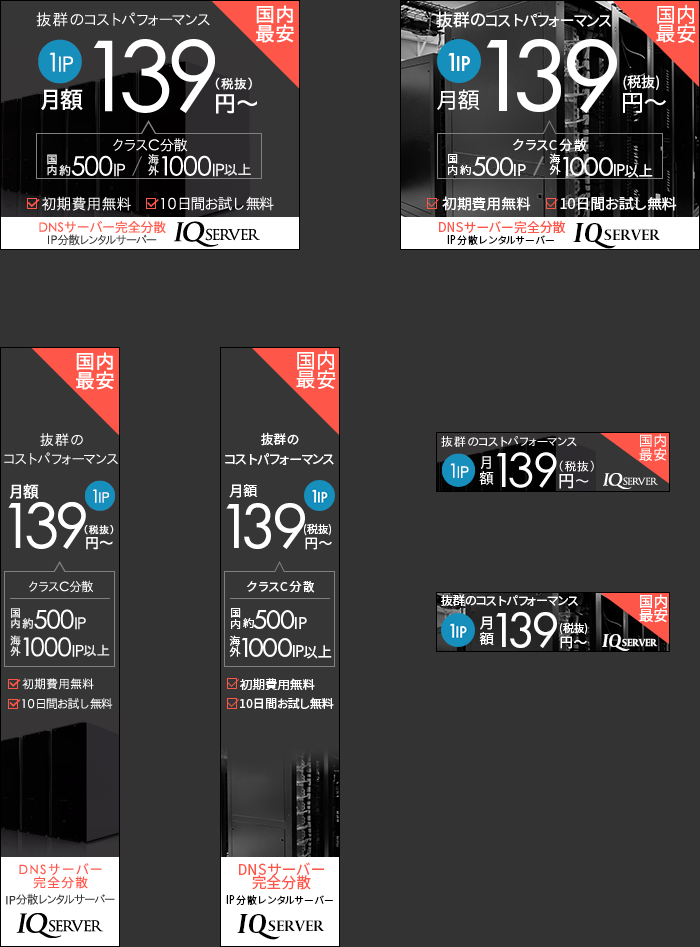
<style>
.page{position:relative;width:700px;height:947px;background:#333333}
.page>*{position:absolute;margin:0}
.t1{font:20px/19px "SourceHanSansJP-Regular";color:#ffffff}
.t2{font:15px "SourceHanSansJP-Regular";color:#ffffff}
.t3{font:17px "SourceHanSansJP-Regular";color:#ffffff}
.t4{font:107.2px "FuturaPT-Book";color:#ffffff}
.t5{font:14px "SourceHanSansJP-Regular";color:#ffffff}
.t6{font:22px "SourceHanSansJP-Normal";color:#ffffff}
.t7{font:23px "SourceHanSansJP-Regular";color:#ffffff}
.t8{font:13px "SourceHanSansJP-Regular";color:#fefefe}
.t9{font:11px/11px "SourceHanSansJP-Normal";color:#fefefe}
.t10{font:28px "FuturaPT-Book";color:#fefefe}
.t11{font:18px "FuturaPT-Book";color:#fefefe}
.t12{font:14px "SourceHanSansJP-Normal";color:#fefefe}
.t13{font:11px "SourceHanSansJP-Normal";color:#fefefe}
.t14{font:14.5px "SourceHanSansJP-Regular";color:#ffffff}
.t15{font:13px "SourceHanCodeJP-Regular";color:#fe5649}
.t16{font:29px "Capitolium2-BoldItalic";color:#000000}
.t17{font:16px "Capitolium2-Bold";color:#000000}
.t18{font:10px "SourceHanCodeJP-Regular";color:#000000}
.t19{font:13px "FuturaPT-Book";color:#000000}
.t20{font:13px/20px "SourceHanSansJP-Regular";color:#ffffff}
.t21{font:14.2px "SourceHanSansJP-Normal";color:#ffffff}
.t22{font:65.6px "FuturaPT-Book";color:#ffffff}
.t23{font:10.9px "SourceHanSansJP-Regular";color:#ffffff}
.t24{font:13.1px "SourceHanSansJP-Regular";color:#ffffff;scale:1.04 1}
.t25{font:12px "SourceHanSansJP-Regular";color:#fefefe}
.t26{font:12px "SourceHanSansJP-Regular";color:#ffffff}
.t27{font:14.8px/14px "SourceHanSansJP-Regular";color:#ffffff}
.t28{font:14.2px/16px "SourceHanSansJP-Normal";color:#ffffff}
.t29{font:50.9px "FuturaPT-Book";color:#ffffff}
.t30{font:19.2px "Capitolium2-BoldItalic";color:#ffffff;scale:0.97 1}
.t31{font:10.6px "Capitolium2-Bold";color:#ffffff}
.t32{font:12px "SourceHanSansJP-Regular";color:#ffffff;scale:1.04 1}
.t33{font:15px/13px "SourceHanCodeJP-Regular";color:#fe5649}
</style>
<div class="page">
<p class="t1" style="left:656px;top:4px;width:40px;height:39px">国内<br>最安</p>
<p class="t2" style="left:436px;top:11px;width:175px;height:17px"><span class="t3">抜群の</span>コストパフォーマンス</p>
<p class="t4" style="left:486px;top:39px;width:131px;height:74px">139</p>
<p class="t5" style="left:623px;top:75px;width:36px;height:15px">(税抜)</p>
<p class="t6" style="left:437px;top:89px;width:43px;height:21px">月額</p>
<p class="t7" style="left:623px;top:93px;width:43px;height:20px">円～</p>
<p class="t8" style="left:513px;top:138px;width:74px;height:14px">クラスC分散</p>
<p class="t9" style="left:448px;top:154px;width:10px;height:21px">国<br>内</p>
<p class="t10" style="left:472px;top:157px;width:54px;height:19px">500<span class="t11">IP</span></p>
<p class="t9" style="left:549px;top:153px;width:12px;height:22px">海<br>外</p>
<p class="t10" style="left:563px;top:157px;width:90px;height:21px">1000<span class="t11">IP</span><span class="t12">以上</span></p>
<p class="t13" style="left:460px;top:165px;width:11px;height:10px">約</p>
<p class="t14" style="left:442px;top:196px;width:89px;height:15px">初期費用無料</p>
<p class="t14" style="left:560px;top:196px;width:117px;height:15px">10日間お試し無料</p>
<p class="t15" style="left:439px;top:220px;width:127px;height:14px">DNSサーバー完全分散</p>
<p class="t16" style="left:573px;top:223px;width:43px;height:26px">IQ</p>
<p class="t17" style="left:604px;top:229px;width:57px;height:12px">SERVER</p>
<p class="t18" style="left:447px;top:235px;width:107px;height:10px"><span class="t19">IP</span>分散レンタルサーバー</p>
<p class="t1" style="left:296px;top:350px;width:40px;height:39px">国内<br>最安</p>
<p class="t20" style="left:225px;top:432px;width:109px;height:33px;text-align:center">抜群の<br>コストパフォーマンス</p>
<p class="t21" style="left:229px;top:484px;width:29px;height:14px">月額</p>
<p class="t22" style="left:226px;top:503px;width:79px;height:46px">139</p>
<p class="t23" style="left:304px;top:523px;width:27px;height:13px">(税抜)</p>
<p class="t24" style="left:305px;top:537px;width:27px;height:13px">円～</p>
<p class="t25" style="left:247px;top:581px;width:68px;height:12px">クラスC分散</p>
<p class="t26" style="left:441px;top:594px;width:137px;height:12px">抜群のコストパフォーマンス</p>
<p class="t27" style="left:639px;top:594px;width:29px;height:29px">国内<br>最安</p>
<p class="t9" style="left:231px;top:608px;width:10px;height:21px">国<br>内</p>
<p class="t10" style="left:253px;top:610px;width:54px;height:19px">500<span class="t11">IP</span></p>
<p class="t28" style="left:479px;top:616px;width:15px;height:29px">月<br>額</p>
<p class="t29" style="left:496px;top:612px;width:61px;height:36px">139</p>
<p class="t13" style="left:243px;top:618px;width:11px;height:10px">約</p>
<p class="t23" style="left:560px;top:622px;width:27px;height:13px">(税抜)</p>
<p class="t9" style="left:229px;top:635px;width:12px;height:22px">海<br>外</p>
<p class="t10" style="left:242px;top:638px;width:90px;height:21px">1000<span class="t11">IP</span><span class="t12">以上</span></p>
<p class="t24" style="left:560px;top:636px;width:27px;height:13px">円～</p>
<p class="t30" style="left:602px;top:634px;width:28px;height:17px">IQ</p>
<p class="t31" style="left:622px;top:638px;width:36px;height:9px">SERVER</p>
<p class="t32" style="left:240px;top:678px;width:75px;height:12px">初期費用無料</p>
<p class="t26" style="left:240px;top:697px;width:94px;height:12px">10日間お試し無料</p>
<p class="t33" style="left:239px;top:862px;width:85px;height:28px;text-align:center">DNSサーバー<br>完全分散</p>
<p class="t18" style="left:226px;top:895px;width:107px;height:10px"><span class="t19">IP</span>分散レンタルサーバー</p>
<p class="t16" style="left:237px;top:914px;width:43px;height:26px">IQ</p>
<p class="t17" style="left:268px;top:920px;width:57px;height:12px">SERVER</p>
</div>
